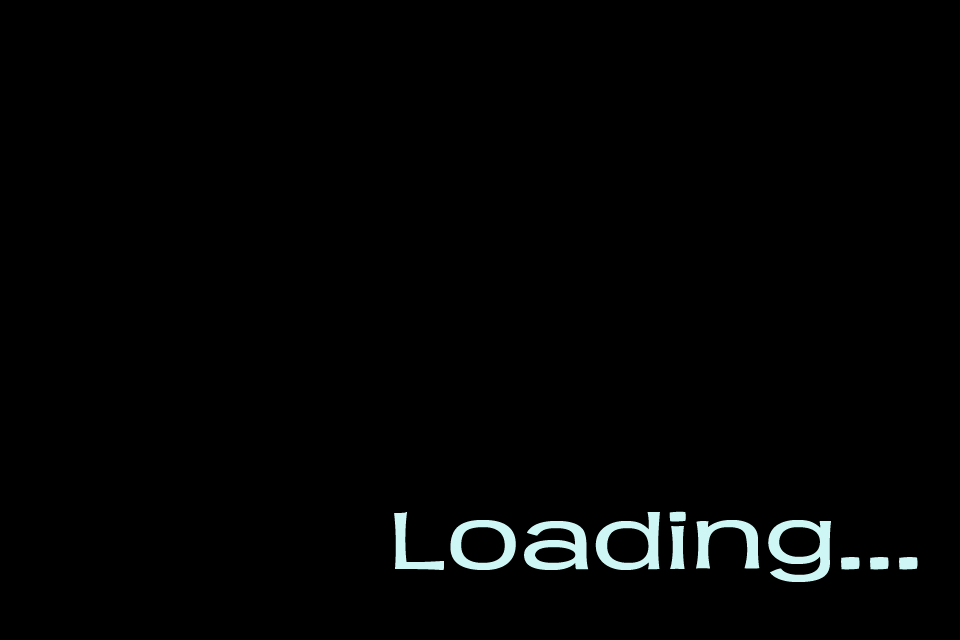
<style>
.page{position:relative;width:960px;height:640px;background:#000000}
.page>*{position:absolute;margin:0}
.t1{font:89.6px "Teen";color:#cdf6f5;scale:1.43 1}
</style>
<div class="page">
<p class="t1" style="left:394px;top:511px;width:524px;height:71px">Loading...</p>
</div>
